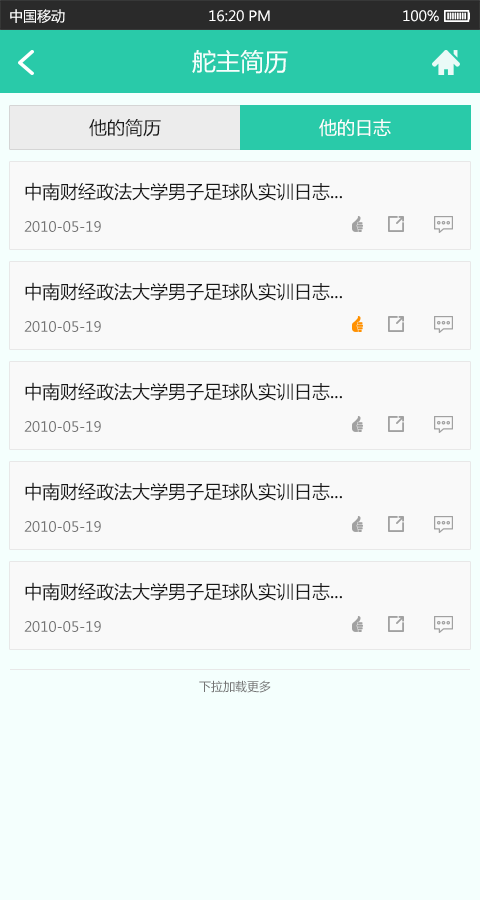
<style>
.page{position:relative;width:480px;height:900px;background:#f9f9f9}
.page>*{position:absolute;margin:0}
.t1{font:14px "MicrosoftYaHei";color:#ffffff}
.t2{font:24px "MicrosoftYaHei";color:#f4fffd}
.t3{font:18px "MicrosoftYaHei";color:#191919}
.t4{font:18px "MicrosoftYaHei";color:#ffffff}
.t5{font:14px "MicrosoftYaHei";color:#737373}
.t6{font:12px "MicrosoftYaHei";color:#737373}
</style>
<div class="page">
<p class="t1" style="left:10px;top:9px;width:55px;height:14px">中国移动</p>
<p class="t1" style="left:209px;top:10px;width:61px;height:12px">16:20 PM</p>
<p class="t1" style="left:403px;top:10px;width:36px;height:12px">100%</p>
<p class="t2" style="left:192px;top:50px;width:96px;height:24px">舵主简历</p>
<p class="t3" style="left:89px;top:119px;width:72px;height:18px">他的简历</p>
<p class="t4" style="left:319px;top:119px;width:72px;height:18px">他的日志</p>
<p class="t3" style="left:25px;top:182px;width:317px;height:19px">中南财经政法大学男子足球队实训日志...</p>
<p class="t5" style="left:24px;top:221px;width:77px;height:11px">2010-05-19</p>
<p class="t3" style="left:25px;top:282px;width:317px;height:19px">中南财经政法大学男子足球队实训日志...</p>
<p class="t5" style="left:24px;top:321px;width:77px;height:11px">2010-05-19</p>
<p class="t3" style="left:25px;top:382px;width:317px;height:19px">中南财经政法大学男子足球队实训日志...</p>
<p class="t5" style="left:24px;top:421px;width:77px;height:11px">2010-05-19</p>
<p class="t3" style="left:25px;top:482px;width:317px;height:19px">中南财经政法大学男子足球队实训日志...</p>
<p class="t5" style="left:24px;top:521px;width:77px;height:11px">2010-05-19</p>
<p class="t3" style="left:25px;top:582px;width:317px;height:19px">中南财经政法大学男子足球队实训日志...</p>
<p class="t5" style="left:24px;top:621px;width:77px;height:11px">2010-05-19</p>
<p class="t6" style="left:199px;top:680px;width:72px;height:13px">下拉加载更多</p>
</div>
